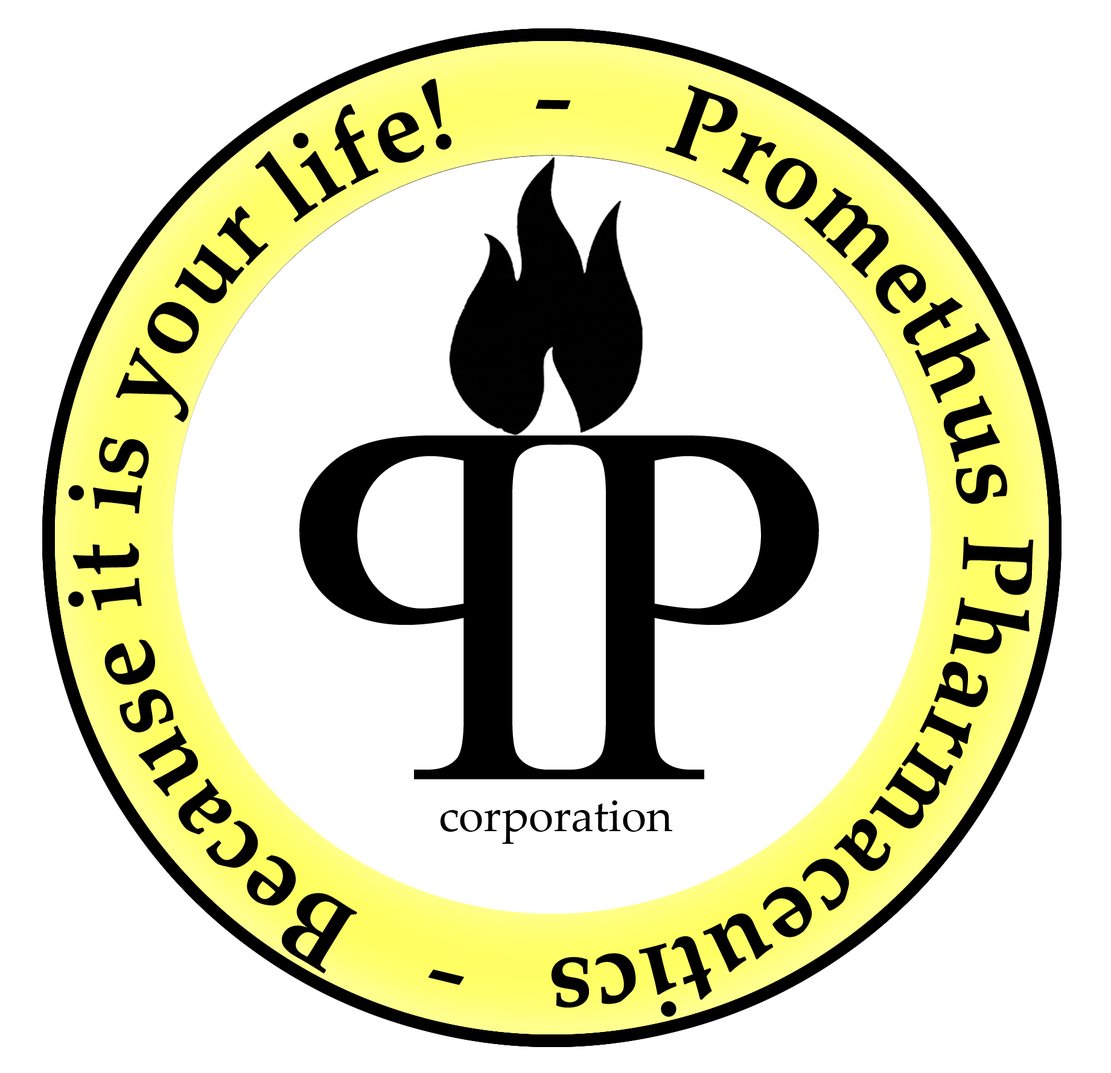
<style>
.page{position:relative;width:1111px;height:1073px;background:#ffffff}
.page>*{position:absolute;margin:0}
.t1{font:100.6px "PalatinoLinotype-Bold";color:#000000}
.t2{font:120.7px "PalatinoLinotype-Roman";color:#000000}
.t3{font:628.5px "ShonarBangla";color:#000000}
.t4{font:45.3px "PalatinoLinotype-Roman";color:#000000}
</style>
<div class="page">
<p class="t1" style="left:68px;top:78px;width:966px;height:939px">Promethus Pharmaceutics   <span class="t2">-</span>   Because it is your life!   <span class="t2">-</span></p>
<p class="t3" style="left:299px;top:436px;width:263px;height:344px;rotate:180deg">P</p>
<p class="t3" style="left:556px;top:436px;width:263px;height:344px">P</p>
<p class="t4" style="left:440px;top:801px;width:232px;height:43px">corporation</p>
</div>
